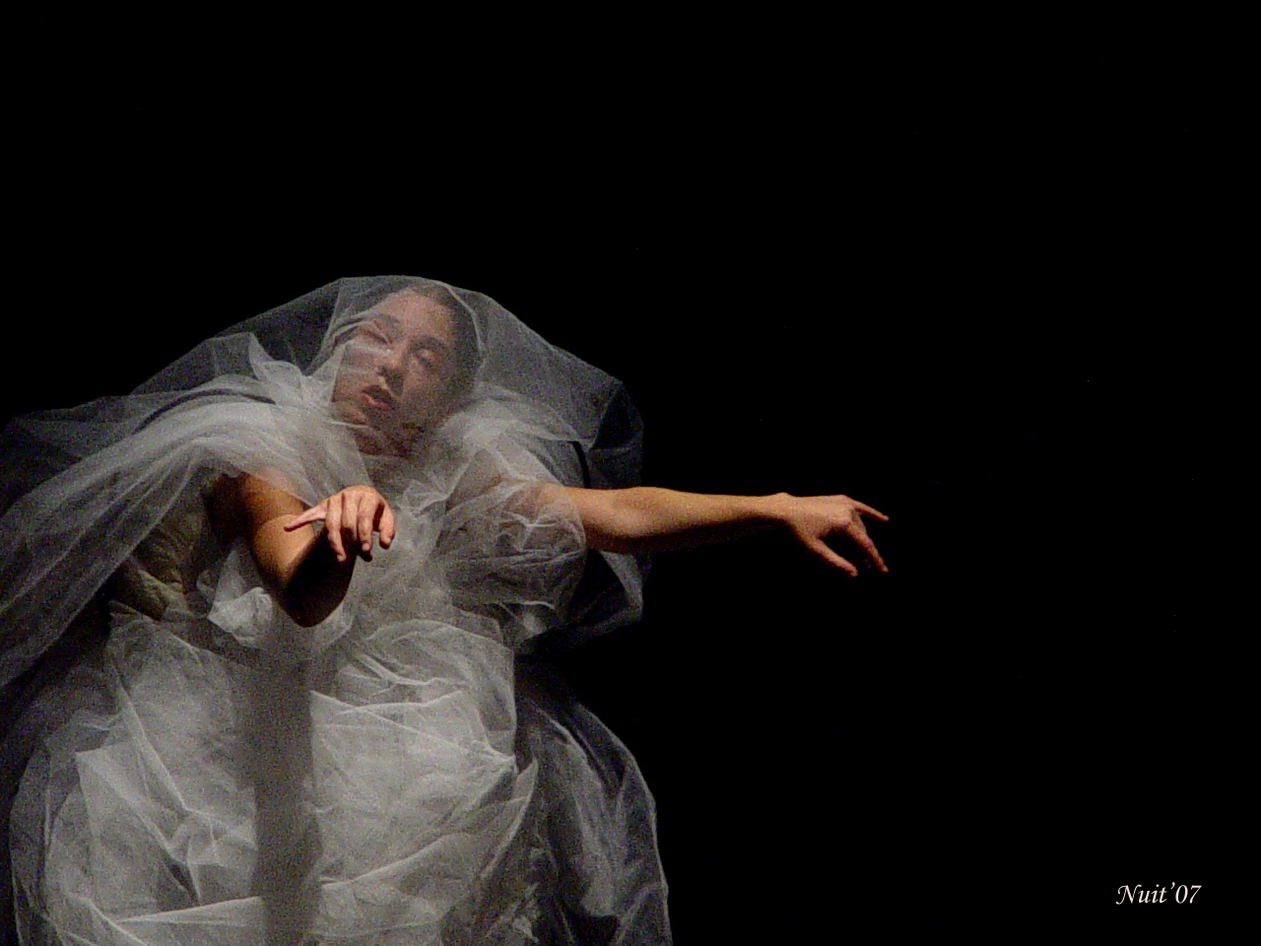
<style>
.page{position:relative;width:1261px;height:946px;background:#000000}
.page>*{position:absolute;margin:0}
.t1{font:29.6px "MonotypeCorsiva";color:#efdfdf}
</style>
<div class="page">
<p class="t1" style="left:1115px;top:882px;width:87px;height:22px">Nuit’07</p>
</div>
